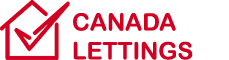
<style>
.page{position:relative;width:229px;height:60px;background:#ffffff}
.page>*{position:absolute;margin:0}
.t1{font:24px "ArialRoundedMTBold";color:#d10023}
</style>
<div class="page">
<p class="t1" style="left:73px;top:13px;width:120px;height:47px">CANADA<br>LETTINGS</p>
</div>
